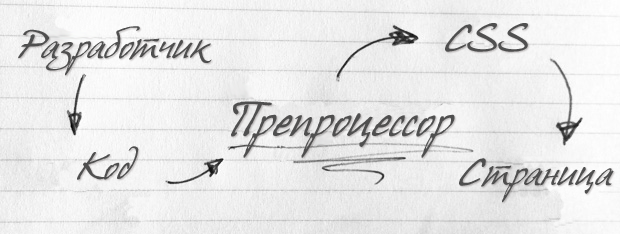
<style>
.page{position:relative;width:620px;height:234px}
.page>*{position:absolute;margin:0}
.t1{font:33px "HansHand-_cyr";color:#4f4f4f}
.t2{font:42px "HansHand-_cyr";color:#4f4f4f}
</style>
<div class="page">
<p class="t1" style="left:18px;top:26px;width:194px;height:50px">Разработчик</p>
<p class="t1" style="left:445px;top:23px;width:83px;height:29px">CSS</p>
<p class="t2" style="left:231px;top:101px;width:224px;height:57px">Препроцессор</p>
<p class="t1" style="left:77px;top:146px;width:62px;height:34px">Код</p>
<p class="t1" style="left:459px;top:158px;width:155px;height:45px">Страница</p>
</div>
